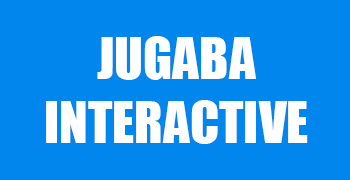
<style>
.page{position:relative;width:350px;height:180px;background:#0186ed}
.page>*{position:absolute;margin:0}
.t1{font:53px "Impact";color:#ffffff}
</style>
<div class="page">
<p class="t1" style="left:46px;top:36px;width:262px;height:108px;text-align:center">JUGABA<br>INTERACTIVE</p>
</div>
